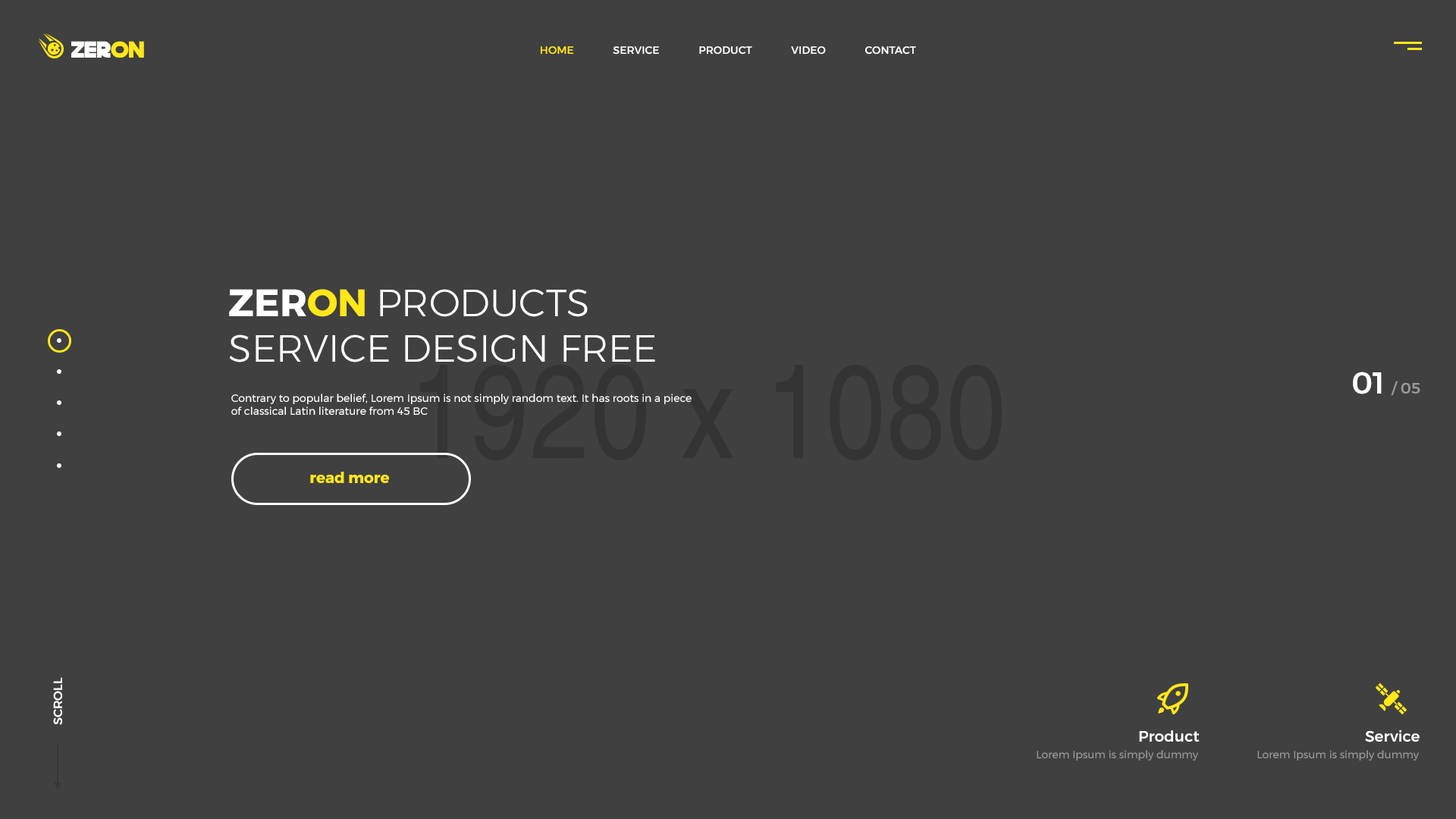
<style>
.page{position:relative;width:1456px;height:819px;background:#404040}
.page>*{position:absolute;margin:0}
.t1{font:22.7px "DeathStar";letter-spacing:0.001em;color:#ffffff}
.t2{font:22.7px "DeathStar";letter-spacing:0.001em;color:#ffe718}
.t3{font:10.6px "Montserrat-Medium";letter-spacing:0.001em;color:#ffffff}
.t4{font:10.6px "Montserrat-Medium";letter-spacing:0.001em;color:#ffe718}
.t5{font:37.9px "Montserrat-Light";letter-spacing:0.001em;color:#ffffff}
.t6{font:37.9px "Montserrat-Bold";letter-spacing:0.001em;color:#ffffff}
.t7{font:37.9px "Montserrat-Bold";letter-spacing:0.001em;color:#ffe718}
.t8{font:15.2px "Montserrat-Medium";letter-spacing:0.001em;color:#9a9a9a}
.t9{font:30.3px "Montserrat-Medium";letter-spacing:0.001em;color:#ffffff}
.t10{font:10.6px "Montserrat-Regular";letter-spacing:0.001em;color:#ffffff}
.t11{font:15.2px "Montserrat-Bold";letter-spacing:0.001em;color:#ffe718}
.t12{font:12.1px "Montserrat-Medium";letter-spacing:0.001em;color:#ffffff}
.t13{font:15.2px "Montserrat-Medium";letter-spacing:0.001em;color:#ffffff}
.t14{font:10.6px "Montserrat-Regular";letter-spacing:0.001em;color:#9a9a9a}
</style>
<div class="page">
<p class="t1" style="left:71px;top:41px;width:73px;height:17px">zer<span class="t2">on</span></p>
<p class="t3" style="left:541px;top:46px;width:375px;height:9px"><span class="t4">HOME </span>              SERVICE               PRODUCT               VIDEO               CONTACT</p>
<p class="t5" style="left:229px;top:289px;width:426px;height:73px"><span class="t6">ZER</span><span class="t7">ON </span>PRODUCTS<br>SERVICE DESIGN FREE</p>
<p class="t8" style="left:1353px;top:372px;width:67px;height:24px"><span class="t9">01 </span>/ 05</p>
<p class="t10" style="left:231px;top:394px;width:461px;height:21px">Contrary to popular belief, Lorem Ipsum is not simply random text. It has roots in a piece<br>of classical Latin literature from 45 BC</p>
<p class="t11" style="left:310px;top:472px;width:79px;height:11px">read more</p>
<p class="t12" style="left:53px;top:677px;width:10px;height:48px;rotate:-90deg">SCROLL</p>
<p class="t13" style="left:1139px;top:730px;width:61px;height:12px">Product</p>
<p class="t13" style="left:1365px;top:730px;width:55px;height:12px">Service</p>
<p class="t14" style="left:1037px;top:750px;width:161px;height:11px">Lorem Ipsum is simply dummy</p>
<p class="t14" style="left:1257px;top:750px;width:162px;height:11px">Lorem Ipsum is simply dummy</p>
</div>
